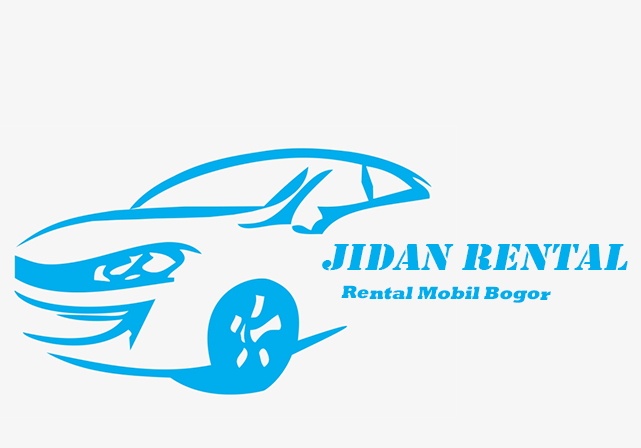
<style>
.page{position:relative;width:641px;height:448px;background:#f6f6f6}
.page>*{position:absolute;margin:0}
.t1{font:38.7px "Stencil";color:#00aeed;font-style:italic;scale:1.15 1}
.t2{font:18px "Rockwell-ExtraBold";color:#00aeed;font-style:italic}
</style>
<div class="page">
<p class="t1" style="left:322px;top:244px;width:306px;height:27px">JIdan Rental</p>
<p class="t2" style="left:341px;top:285px;width:210px;height:18px">Rental Mobil Bogor</p>
</div>
